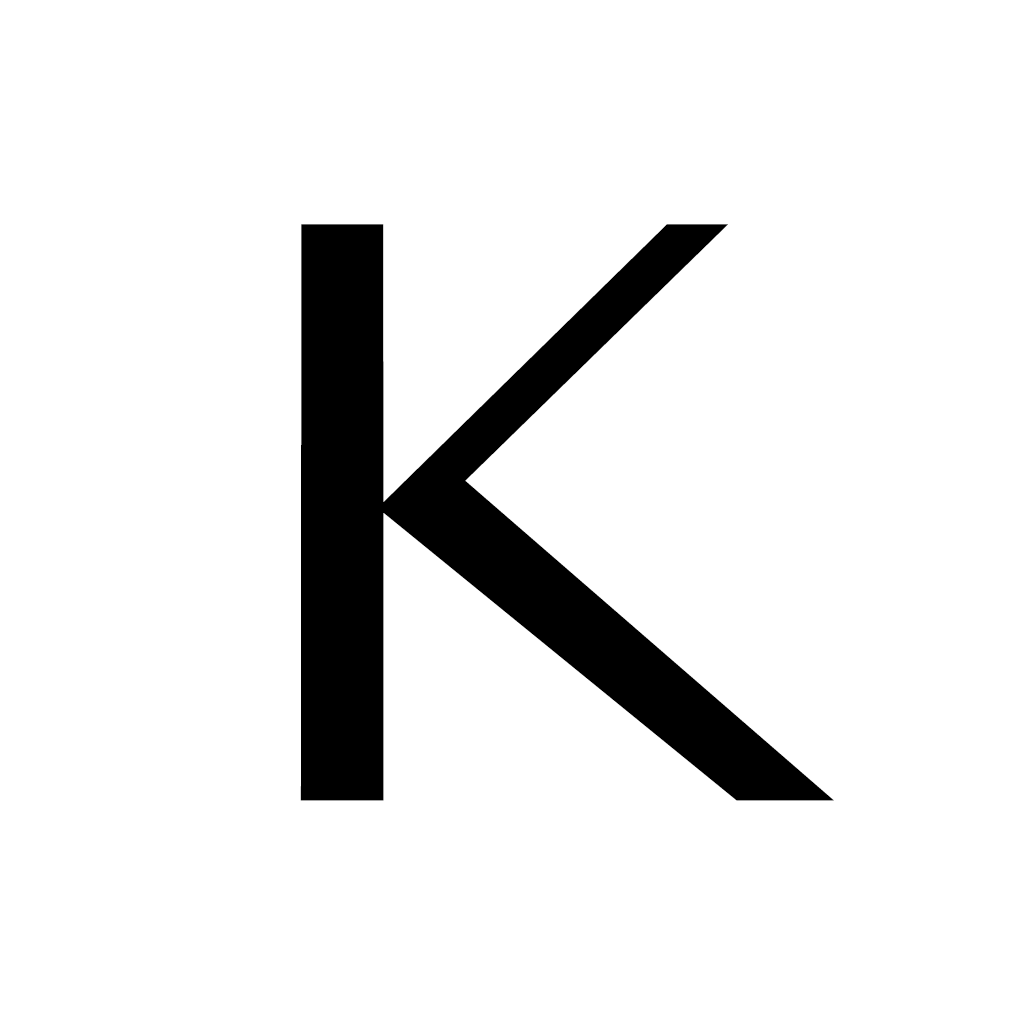
<style>
.page{position:relative;width:1024px;height:1024px;background:#ffffff}
.page>*{position:absolute;margin:0}
.t1{font:870.8px "TimesSansSerif";color:#000000}
</style>
<div class="page">
<p class="t1" style="left:300px;top:224px;width:534px;height:577px">K</p>
</div>
